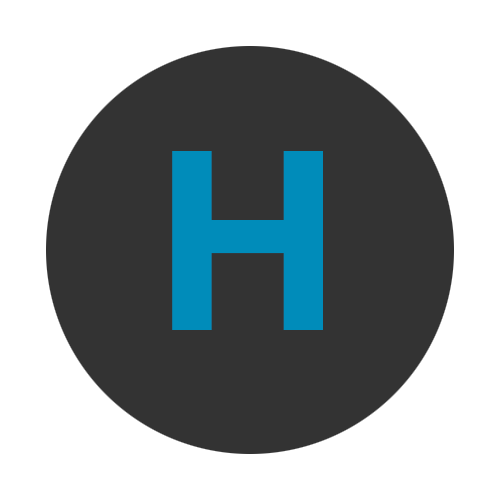
<style>
.page{position:relative;width:500px;height:500px;background:#ffffff}
.page>*{position:absolute;margin:0}
.t1{font:250px "HelveticaNeue-Bold";color:#008cba}
</style>
<div class="page">
<p class="t1" style="left:172px;top:151px;width:151px;height:179px">H</p>
</div>
